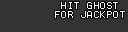
<style>
.page{position:relative;width:128px;height:32px;background:#333333}
.page>*{position:absolute;margin:0}
.t1{font:8px/9px "Terminal";letter-spacing:0.2em;color:#ffffff}
</style>
<div class="page">
<p class="t1" style="left:55px;top:2px;width:70px;height:16px;text-align:center">HIT GHOST<br>FOR JACKPOT</p>
</div>
